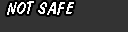
<style>
.page{position:relative;width:128px;height:32px;background:#333333}
.page>*{position:absolute;margin:0}
.t1{font:18px "DomDiagonalBT-Regular";letter-spacing:0.05em;color:#fbfbfb}
.t2{font:18px "DomDiagonalBT-Regular";letter-spacing:0.1em;color:#fbfbfb}
</style>
<div class="page">
<p class="t1" style="left:7px;top:1px;width:67px;height:14px">NOT SA<span class="t2">FE</span></p>
</div>
